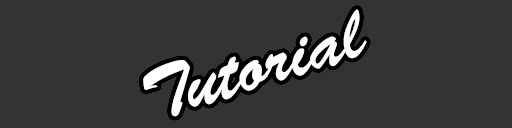
<style>
.page{position:relative;width:512px;height:128px;background:#333333}
.page>*{position:absolute;margin:0}
.t1{font:72px "BrushScriptStd";color:#ffffff}
</style>
<div class="page">
<p class="t1" style="left:143px;top:9px;width:224px;height:108px;rotate:-17deg">Tutorial</p>
</div>
